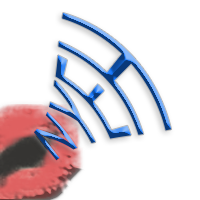
<style>
.page{position:relative;width:200px;height:200px;background:#ffffff}
.page>*{position:absolute;margin:0}
.t1{font:12.6px "MyriadPro-Regular"}
</style>
<div class="page">
<p class="t1" style="left:33px;top:13px;width:139px;height:148px;rotate:-42deg">NYEH</p>
</div>
